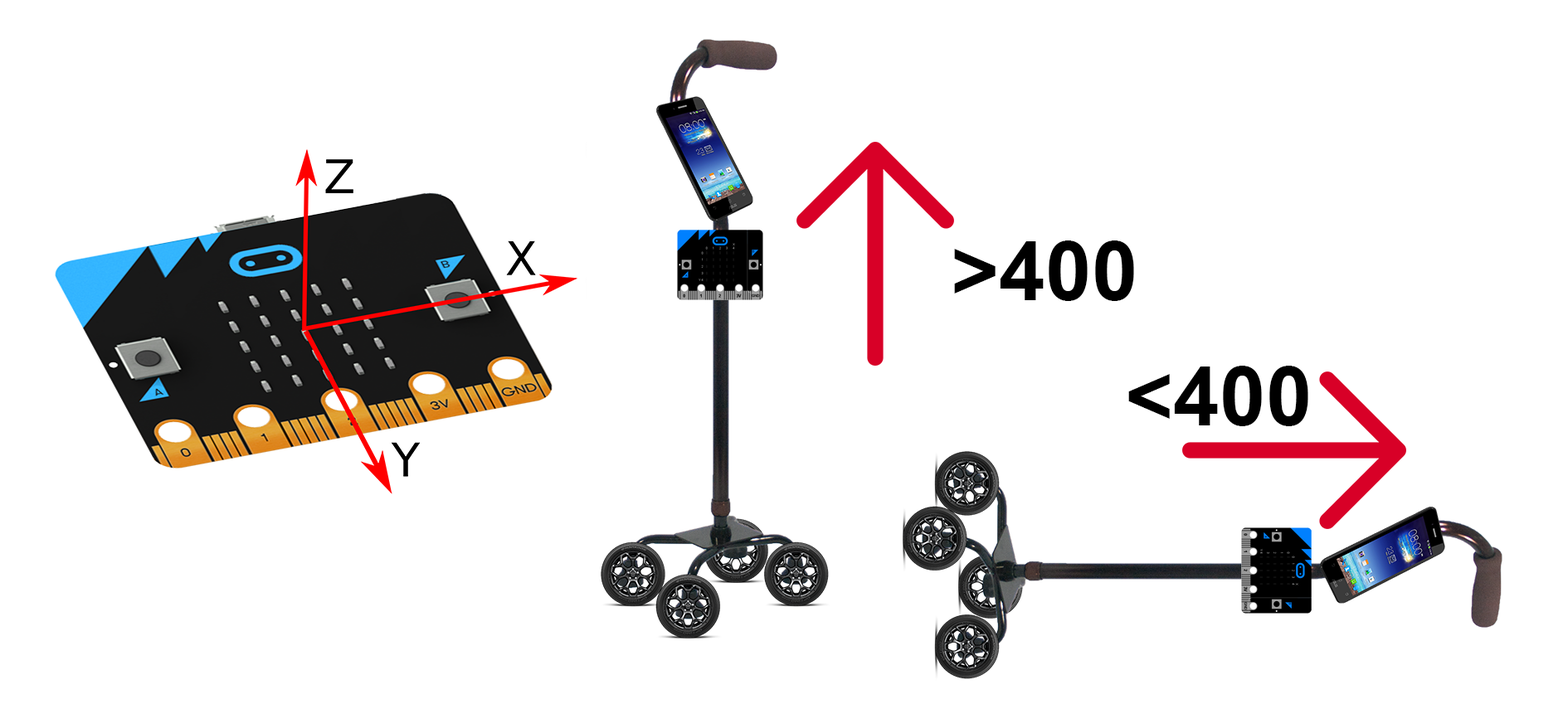
<style>
.page{position:relative;width:1568px;height:704px;background:#ffffff}
.page>*{position:absolute;margin:0}
.t1{font:83px "Arial-BoldMT";color:#000000}
</style>
<div class="page">
<p class="t1" style="left:954px;top:241px;width:180px;height:60px">&gt;400</p>
<p class="t1" style="left:1128px;top:366px;width:180px;height:60px">&lt;400</p>
</div>
